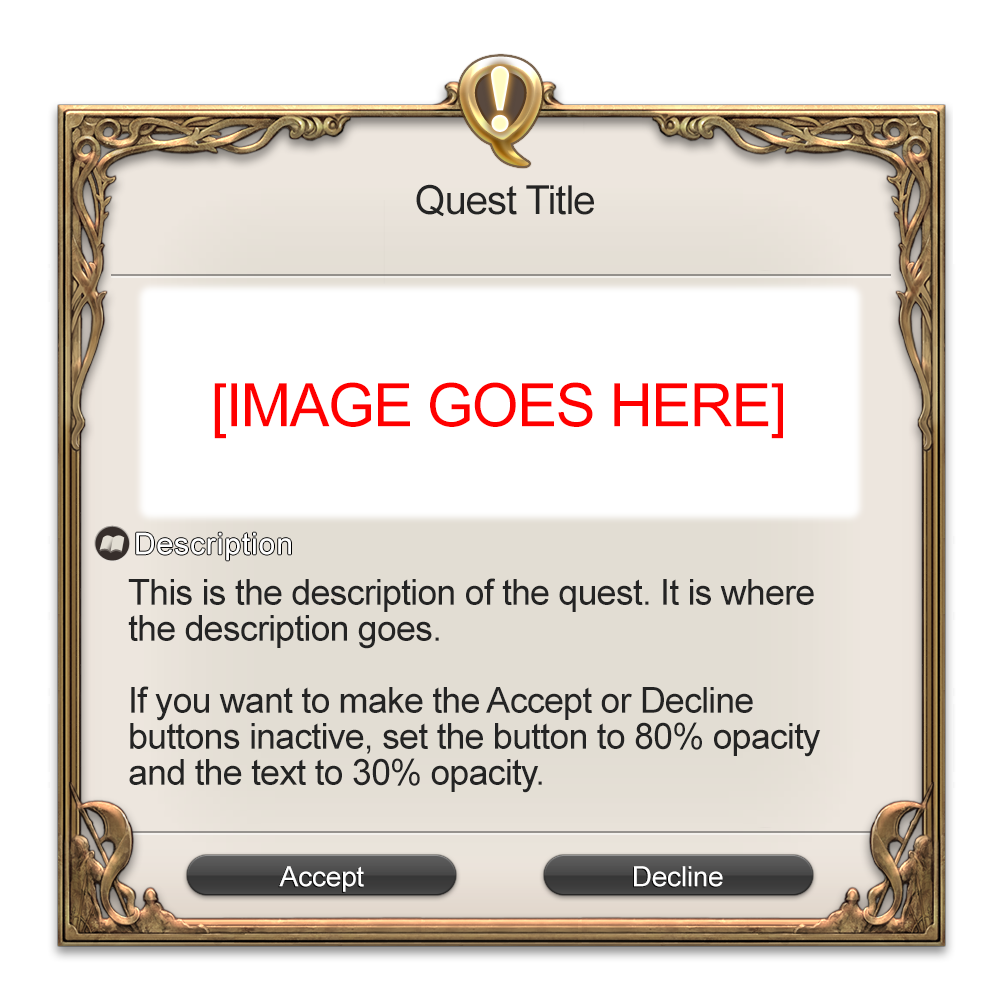
<style>
.page{position:relative;width:1000px;height:1000px;background:#ffffff}
.page>*{position:absolute;margin:0}
.t1{font:40px "ArialMT";letter-spacing:-0.025em;color:#242424}
.t2{font:30px "ArialMT";letter-spacing:0.03em;color:#ffffff}
.t3{font:36px/36px "ArialMT";letter-spacing:-0.025em;color:#242424}
.t4{font:28px "ArialMT";letter-spacing:-0.01em;color:#ffffff}
</style>
<div class="page">
<p class="t1" style="left:416px;top:184px;width:178px;height:33px">Quest Title</p>
<p class="t2" style="left:136px;top:532px;width:155px;height:29px">Description</p>
<p class="t3" style="left:128px;top:578px;width:693px;height:215px">This is the description of the quest. It is where the description goes. <br><br>If you want to make the Accept or Decline buttons inactive, set the button to 80% opacity and the text to 30% opacity.</p>
<p class="t4" style="left:279px;top:866px;width:85px;height:26px">Accept</p>
<p class="t4" style="left:634px;top:866px;width:89px;height:21px">Decline</p>
</div>
